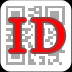
<style>
.page{position:relative;width:72px;height:72px;background:#ffffff}
.page>*{position:absolute;margin:0}
.t1{font:48px "Georgia";letter-spacing:0.05em;color:#fe0006}
</style>
<div class="page">
<p class="t1" style="left:9px;top:19px;width:56px;height:33px">ID</p>
</div>
